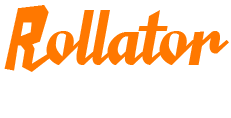
<style>
.page{position:relative;width:231px;height:118px;background:#ffffff}
.page>*{position:absolute;margin:0}
.t1{font:75.7px "SaucyMillionaire";color:#ff7800}
</style>
<div class="page">
<p class="t1" style="left:4px;top:5px;width:225px;height:67px">Rollator</p>
</div>
